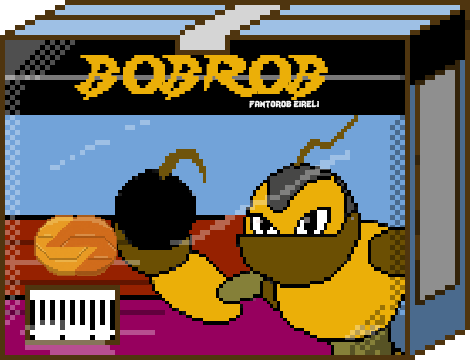
<style>
.page{position:relative;width:470px;height:360px}
.page>*{position:absolute;margin:0}
.t1{font:48px "Lady-Radical";color:#ebaf08;scale:0.93 1}
.t2{font:12px "Lady-Radical";color:#fbfbfb}
</style>
<div class="page">
<p class="t1" style="left:74px;top:55px;width:254px;height:45px">BOBROB</p>
<p class="t2" style="left:249px;top:100px;width:70px;height:8px">fantorob eireli</p>
</div>
